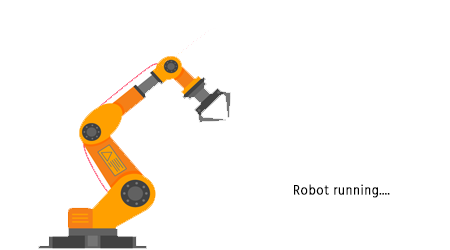
<style>
.page{position:relative;width:450px;height:250px;background:#ffffff}
.page>*{position:absolute;margin:0}
.t1{font:13.9px "HindSiliguri-Light";letter-spacing:0.05em;color:#000000;font-weight:bold;scale:0.89 1}
</style>
<div class="page">
<p class="t1" style="left:294px;top:184px;width:96px;height:14px">Robot running....</p>
</div>
